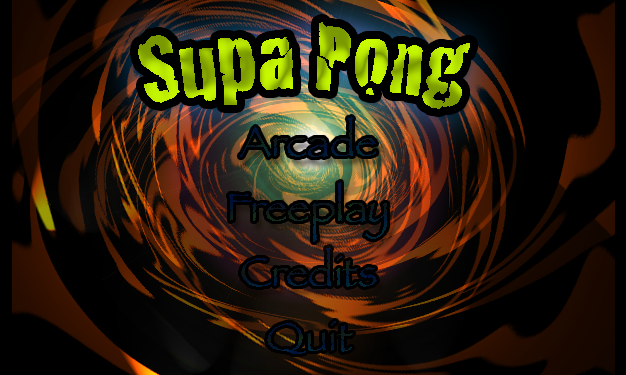
<style>
.page{position:relative;width:626px;height:375px;background:#000000}
.page>*{position:absolute;margin:0}
.t1{font:100px "Cracked"}
.t2{font:42px "Papyrus";color:#041834}
.t3{font:42px "Papyrus";color:#031732}
</style>
<div class="page">
<p class="t1" style="left:138px;top:22px;width:332px;height:87px">Supa Pong</p>
<p class="t2" style="left:241px;top:247px;width:136px;height:40px">Credits</p>
<p class="t3" style="left:267px;top:321px;width:86px;height:33px">Quit</p>
</div>
